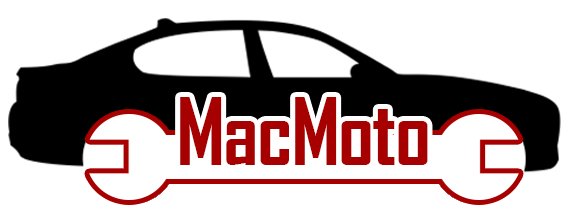
<style>
.page{position:relative;width:570px;height:223px;background:#ffffff}
.page>*{position:absolute;margin:0}
.t1{font:88.7px "AgencyFB-Bold";letter-spacing:-0.02em;color:#a70000}
</style>
<div class="page">
<p class="t1" style="left:180px;top:97px;width:248px;height:68px">MacMoto</p>
</div>
